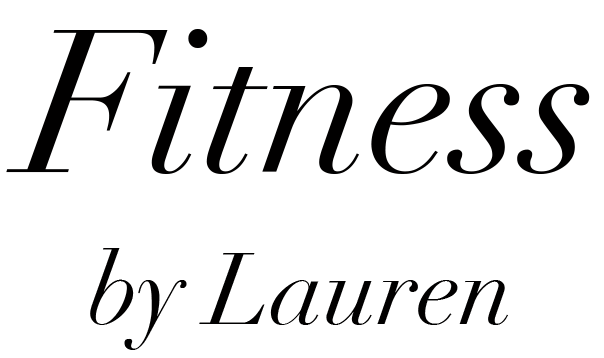
<style>
.page{position:relative;width:604px;height:358px;background:#ffffff}
.page>*{position:absolute;margin:0}
.t1{font:200px "Didot-Italic";color:#010000}
.t2{font:100px "Didot-Italic";color:#010000}
</style>
<div class="page">
<p class="t1" style="left:6px;top:29px;width:584px;height:145px">Fitness</p>
<p class="t2" style="left:90px;top:248px;width:418px;height:102px">by Lauren</p>
</div>
